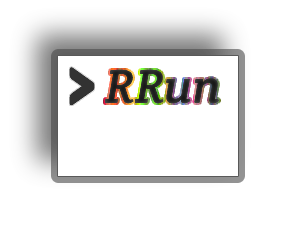
<style>
.page{position:relative;width:300px;height:250px;background:#ffffff}
.page>*{position:absolute;margin:0}
.t1{font:70px "Days";color:#323232}
.t2{font:48px "CreteRound-Italic";color:#252525}
</style>
<div class="page">
<p class="t1" style="left:69px;top:66px;width:26px;height:40px">&gt;</p>
<p class="t2" style="left:104px;top:69px;width:115px;height:35px">RRun</p>
</div>
